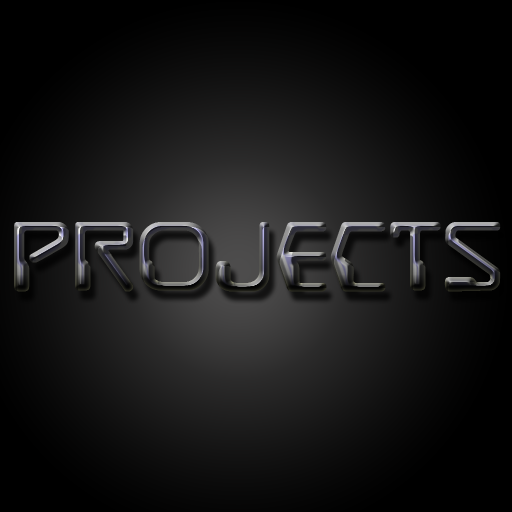
<style>
.page{position:relative;width:512px;height:512px}
.page>*{position:absolute;margin:0}
.t1{font:95px "DestructoBeamBB";font-weight:bold}
</style>
<div class="page">
<p class="t1" style="left:14px;top:222px;width:487px;height:70px">projects</p>
</div>
